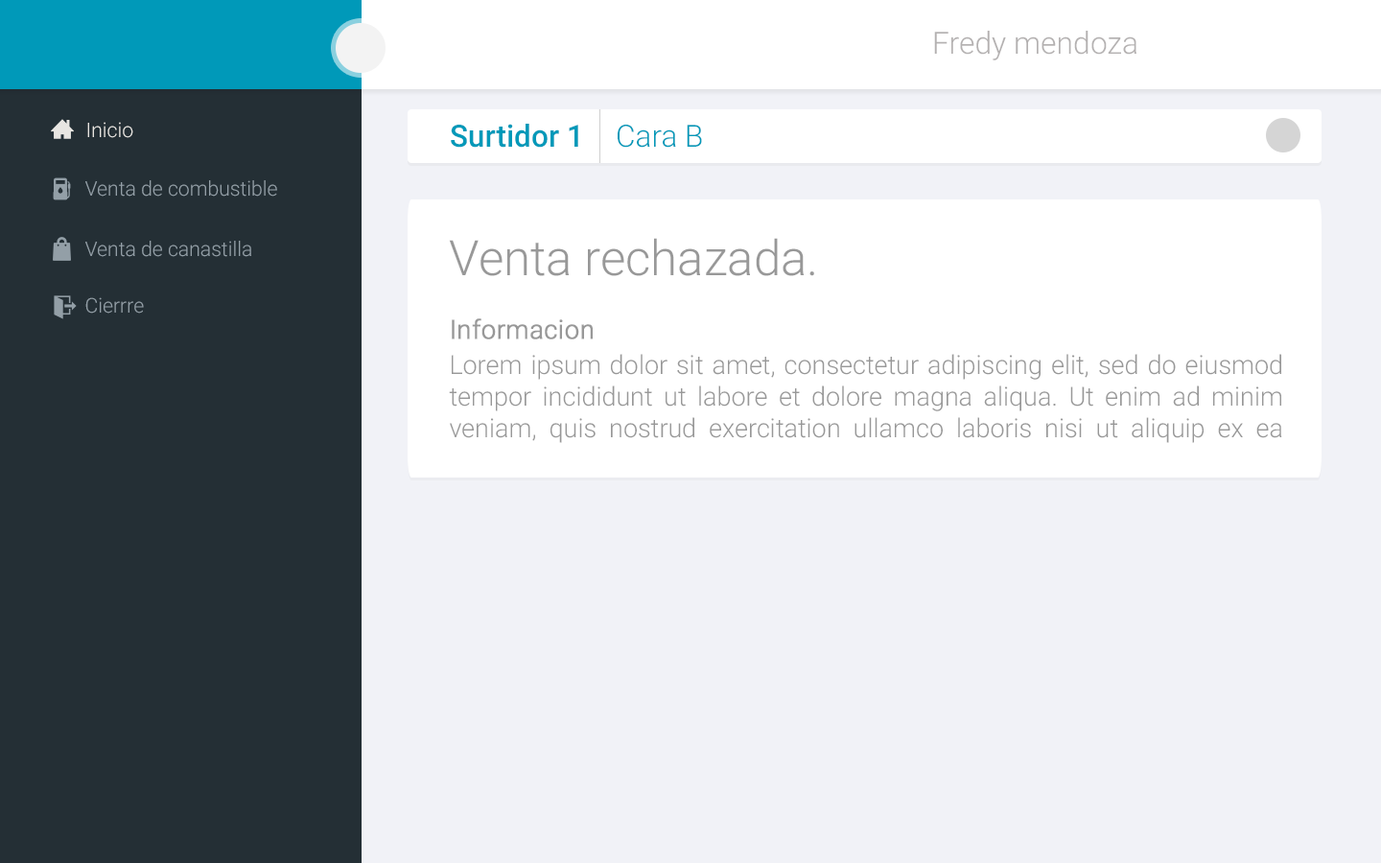
<style>
.page{position:relative;width:1381px;height:863px;background:#f1f2f7}
.page>*{position:absolute;margin:0}
.t1{font:30.7px "Roboto-Light";color:#b4b1b1}
.t2{font:20.3px "Roboto-Light";color:#e8e6e2}
.t3{font:30.7px "Roboto-Medium";color:#0099b9}
.t4{font:30.7px "Roboto-Light";color:#0099b9}
.t5{font:20.3px "Roboto-Light";color:#939fa7}
.t6{font:48.9px "Roboto-Light";color:#989898}
.t7{font:26.1px "Roboto-Light";color:#989898;font-weight:bold}
.t8{font:26.1px "Roboto-Light";color:#989898}
</style>
<div class="page">
<p class="t1" style="left:934px;top:31px;width:203px;height:29px">Fredy mendoza</p>
<p class="t2" style="left:87px;top:122px;width:46px;height:16px">Inicio</p>
<p class="t3" style="left:451px;top:124px;width:127px;height:24px">Surtidor 1</p>
<p class="t4" style="left:618px;top:125px;width:84px;height:23px">Cara B</p>
<p class="t5" style="left:85px;top:180px;width:192px;height:17px">Venta de combustible</p>
<p class="t5" style="left:85px;top:241px;width:166px;height:16px">Venta de canastilla</p>
<p class="t6" style="left:449px;top:238px;width:365px;height:38px">Venta rechazada.</p>
<p class="t5" style="left:85px;top:297px;width:59px;height:17px">Cierrre</p>
<p class="t7" style="left:452px;top:318px;width:141px;height:22px">Informacion</p>
<p class="t8" style="left:449px;top:354px;width:833px;height:89px;text-align:justify">Lorem ipsum dolor sit amet, consectetur adipiscing elit, sed do eiusmod<br>tempor incididunt ut labore et dolore magna aliqua. Ut enim ad minim veniam, quis nostrud exercitation ullamco laboris nisi ut aliquip ex ea commodo consequat.</p>
</div>
